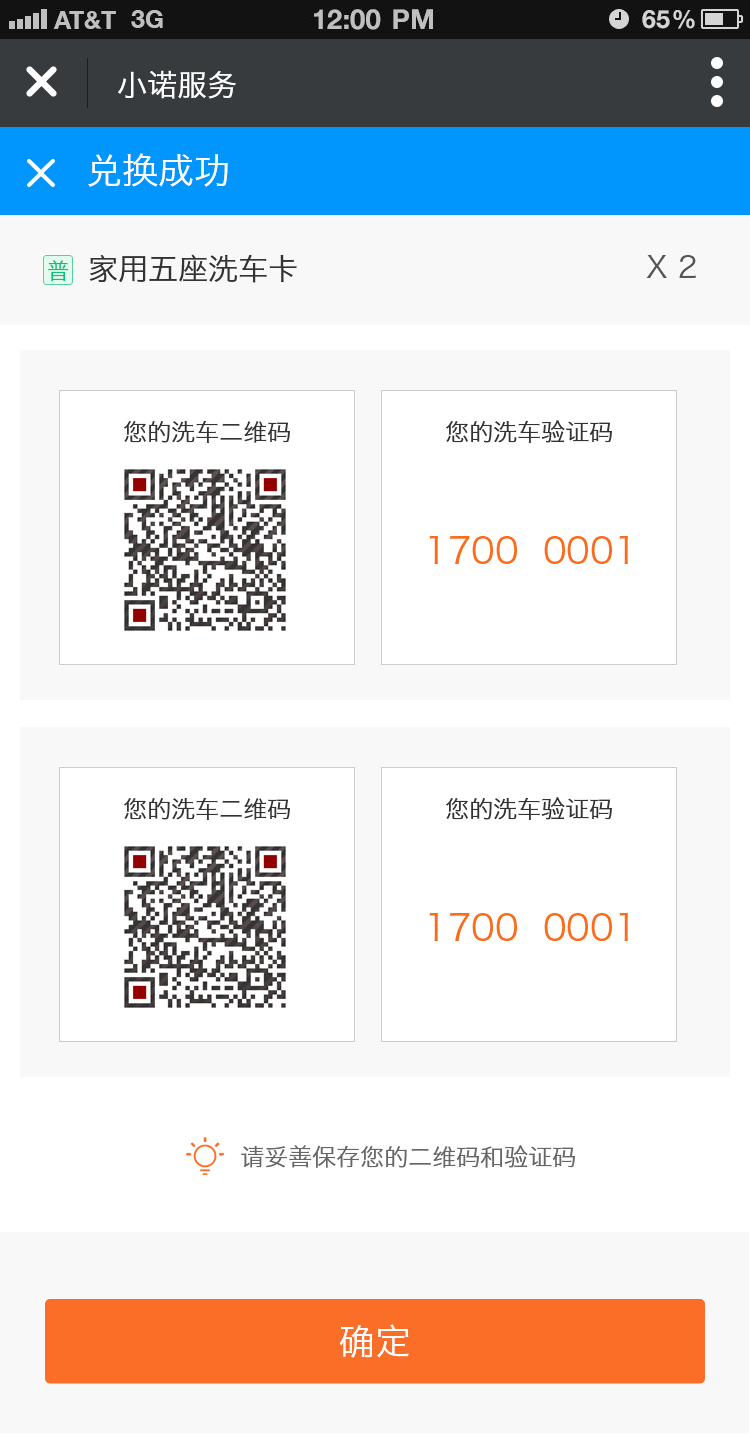
<style>
.page{position:relative;width:750px;height:1434px;background:#ffffff}
.page>*{position:absolute;margin:0}
.t1{font:30px "HiraginoSansGB-W3";color:#ffffff}
.t2{font:36px "HiraginoSansGB-W3";color:#ffffff}
.t3{font:30px "HiraginoSansGB-W3";color:#333333}
.t4{font:30px "HiraginoSansGB-W3";color:#555555}
.t5{font:22px "HiraginoSansGB-W3";color:#07c279}
.t6{font:24px "HiraginoSansGB-W3";color:#333333}
.t7{font:36px "HiraginoSansGB-W3";color:#fa6b15}
.t8{font:24px "HiraginoSansGB-W3";color:#666666}
</style>
<div class="page">
<p class="t1" style="left:118px;top:70px;width:118px;height:29px">小诺服务</p>
<p class="t2" style="left:88px;top:153px;width:140px;height:34px">兑换成功</p>
<p class="t3" style="left:89px;top:254px;width:208px;height:29px">家用五座洗车卡</p>
<p class="t4" style="left:646px;top:255px;width:50px;height:24px">X 2</p>
<p class="t5" style="left:48px;top:260px;width:20px;height:21px">普</p>
<p class="t6" style="left:123px;top:420px;width:167px;height:23px">您的洗车二维码</p>
<p class="t6" style="left:445px;top:420px;width:167px;height:23px">您的洗车验证码</p>
<p class="t7" style="left:429px;top:535px;width:199px;height:29px">1700  0001</p>
<p class="t6" style="left:123px;top:797px;width:167px;height:23px">您的洗车二维码</p>
<p class="t6" style="left:445px;top:797px;width:167px;height:23px">您的洗车验证码</p>
<p class="t7" style="left:429px;top:912px;width:199px;height:29px">1700  0001</p>
<p class="t8" style="left:241px;top:1145px;width:334px;height:23px">请妥善保存您的二维码和验证码</p>
<p class="t2" style="left:339px;top:1324px;width:70px;height:34px">确定</p>
</div>
